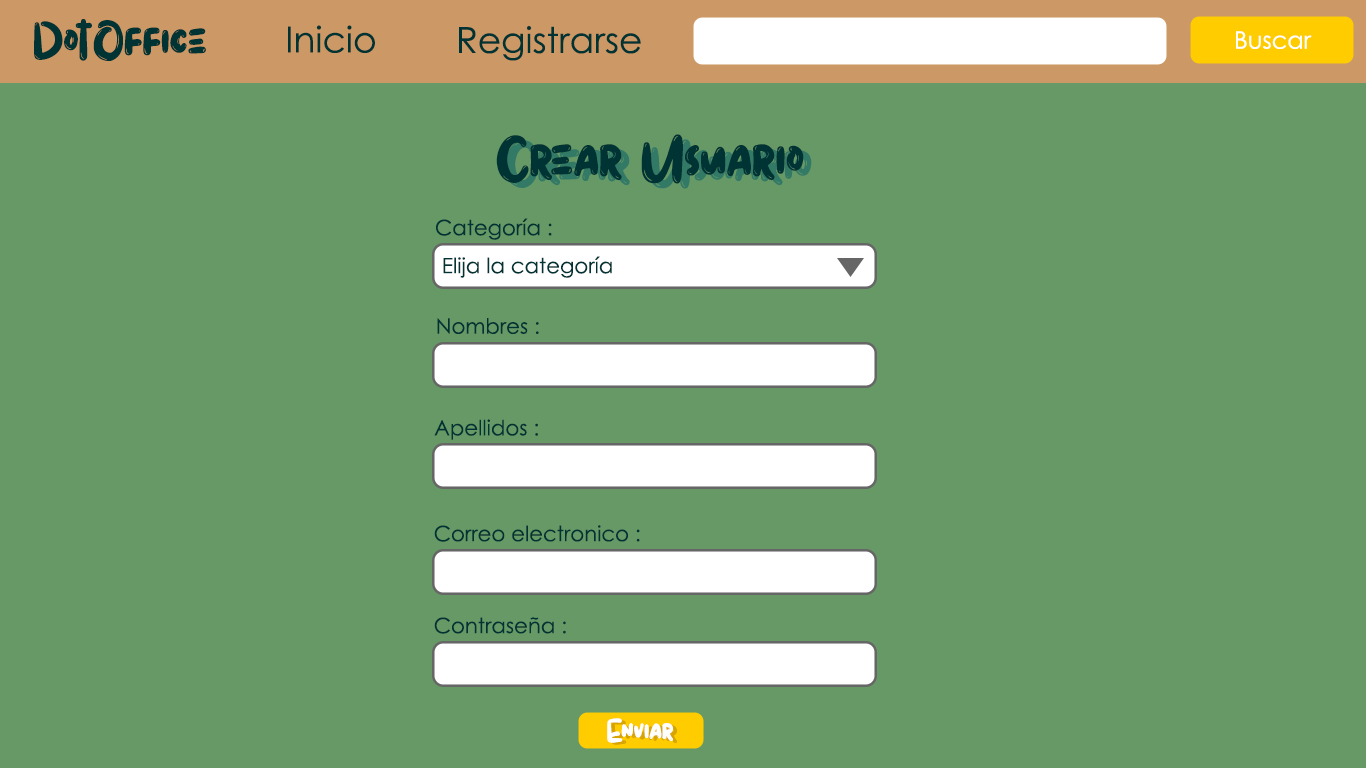
<style>
.page{position:relative;width:1366px;height:768px;background:#669966}
.page>*{position:absolute;margin:0}
.t1{font:60px "Stella";color:#003333}
.t2{font:36px "CenturyGothic";color:#003333}
.t3{font:24px "CenturyGothic";color:#ffffff}
.t4{font:72px "Stella";color:#003333}
.t5{font:72px "Stella"}
.t6{font:21.2px "CenturyGothic";color:#003333}
.t7{font:36px "Stella";color:#ffffff}
.t8{font:36px "Stella"}
</style>
<div class="page">
<p class="t1" style="left:34px;top:19px;width:172px;height:42px">DotOffice</p>
<p class="t2" style="left:288px;top:25px;width:87px;height:28px">Inicio</p>
<p class="t2" style="left:459px;top:25px;width:182px;height:36px">Registrarse</p>
<p class="t3" style="left:1236px;top:30px;width:76px;height:18px">Buscar</p>
<p class="t3" style="left:1236px;top:31px;width:76px;height:18px">Buscar</p>
<p class="t4" style="left:496px;top:134px;width:308px;height:50px">Crear Usuario</p>
<p class="t5" style="left:504px;top:139px;width:308px;height:50px">Crear Usuario</p>
<p class="t6" style="left:436px;top:218px;width:116px;height:22px">Categoría :</p>
<p class="t6" style="left:443px;top:256px;width:169px;height:22px">Elija la categoría</p>
<p class="t6" style="left:437px;top:318px;width:102px;height:16px">Nombres :</p>
<p class="t6" style="left:434px;top:419px;width:104px;height:21px">Apellidos :</p>
<p class="t6" style="left:434px;top:525px;width:206px;height:17px">Correo electronico :</p>
<p class="t6" style="left:434px;top:617px;width:132px;height:17px">Contraseña :</p>
<p class="t7" style="left:607px;top:718px;width:66px;height:25px">Enviar</p>
<p class="t8" style="left:611px;top:720px;width:66px;height:25px">Enviar</p>
</div>
